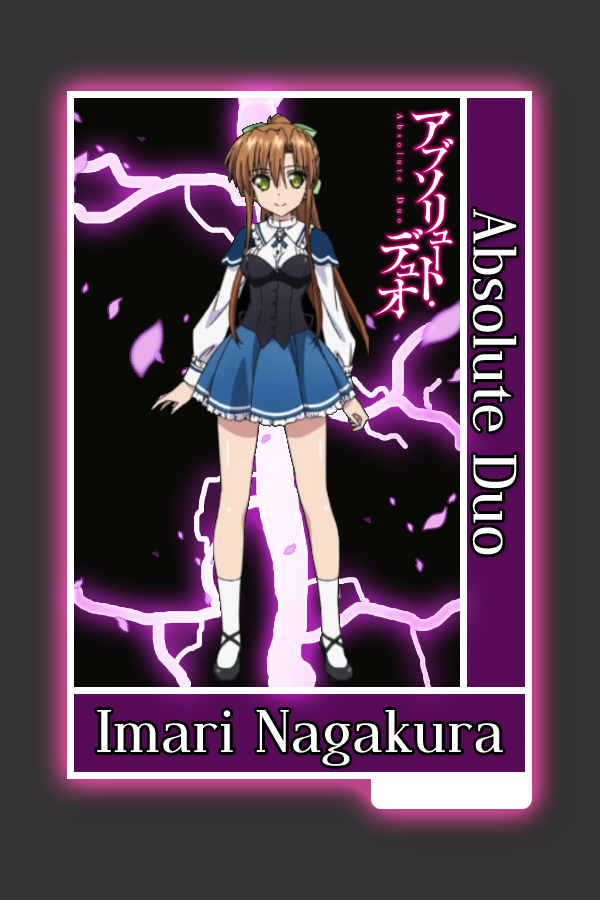
<style>
.page{position:relative;width:600px;height:900px;background:#333333}
.page>*{position:absolute;margin:0}
.t1{font:60px "DustismoRoman";color:#ffffff}
.t2{font:59px "DustismoRoman";color:#ffffff}
</style>
<div class="page">
<p class="t1" style="left:472px;top:208px;width:45px;height:347px;rotate:90deg">Absolute Duo</p>
<p class="t2" style="left:97px;top:709px;width:406px;height:57px">Imari Nagakura</p>
</div>
